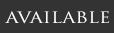
<style>
.page{position:relative;width:114px;height:33px;background:#333333}
.page>*{position:absolute;margin:0}
.t1{font:15.3px "TrajanPro-Regular";color:#fefefe;scale:1.22 1}
</style>
<div class="page">
<p class="t1" style="left:5px;top:11px;width:104px;height:13px">AVAILABLE</p>
<p class="t1" style="left:5px;top:11px;width:104px;height:13px;opacity:0.5">AVAILABLE</p>
</div>
